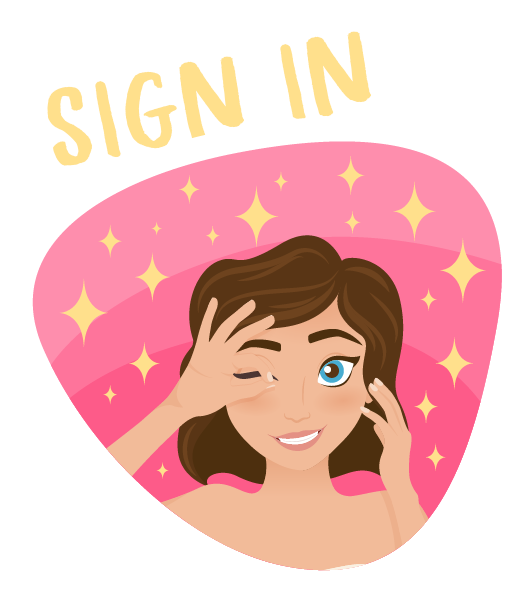
<style>
.page{position:relative;width:527px;height:599px;background:#ffffff}
.page>*{position:absolute;margin:0}
.t1{font:200px "AhoyAmigoDEMO-Regular";color:#ffe08c}
</style>
<div class="page">
<p class="t1" style="left:47px;top:31px;width:324px;height:135px;rotate:-11deg">SIGN IN</p>
<p class="t1" style="left:47px;top:31px;width:324px;height:135px;rotate:-11deg">SIGN IN</p>
</div>
